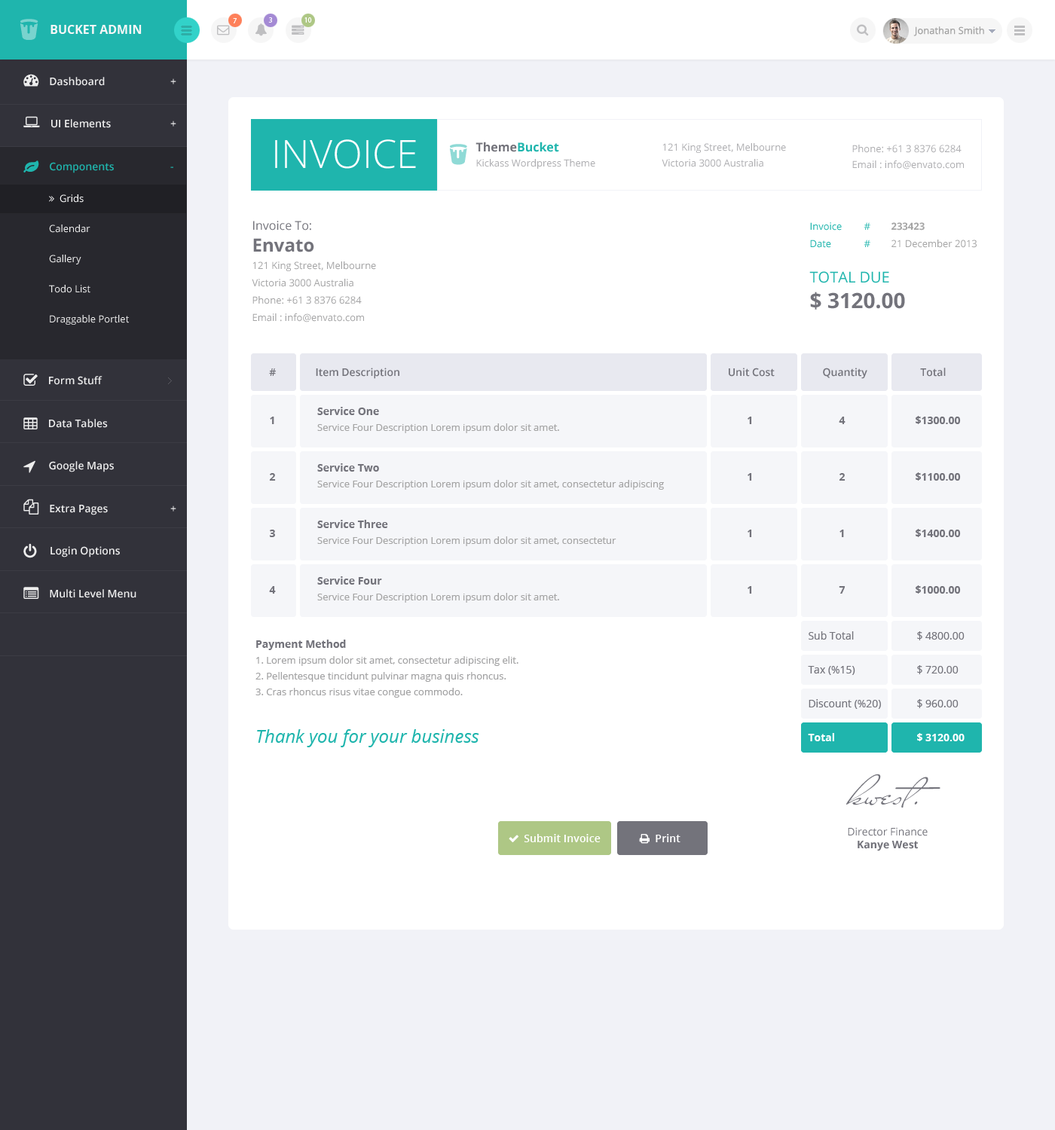
<style>
.page{position:relative;width:1055px;height:1130px;background:#ffffff}
.page>*{position:absolute;margin:0}
.t1{font:7.5px "MyriadPro-Regular";color:#ffffff}
.t2{font:12.1px "OpenSans-Bold";color:#f6f6f6}
.t3{font:9.8px "OpenSans";color:#a4a4a4}
.t4{font:39.2px "OpenSans-Light";color:#ffffff;text-transform:uppercase}
.t5{font:9.8px/15.1px "OpenSans";color:#aeaeb1}
.t6{font:12.1px/15.1px "OpenSans-Bold";color:#73737b}
.t7{font:12.1px/15.1px "OpenSans-Bold";color:#1fb5ad}
.t8{font:9.8px/15.8px "OpenSans";color:#aeaeb1}
.t9{font:9.8px/17.3px "OpenSans";color:#a4a4a5}
.t10{font:12.1px "OpenSans";color:#73737b}
.t11{font:18.1px "OpenSans-Bold";color:#73737b}
.t12{font:9.8px/17.3px "OpenSans";color:#a5a5a5}
.t13{font:9.8px/17.3px "OpenSans";color:#1fb5ad}
.t14{font:9.8px/17.3px "OpenSans-Bold";color:#a5a5a5}
.t15{font:15.1px "OpenSans";color:#1fb5ad;text-transform:uppercase}
.t16{font:21.1px "OpenSans-Bold";color:#73737b}
.t17{font:10.5px "OpenSans-Semibold";color:#73737b}
.t18{font:9.8px/15.8px "OpenSans";color:#a5a5a5}
.t19{font:10.5px/15.8px "OpenSans-Bold";color:#73737b}
.t20{font:10.5px "OpenSans-Bold";color:#73737b}
.t21{font:9.8px/15.8px "OpenSans";color:#a3a3a4}
.t22{font:18.1px/15.8px "OpenSans-Italic";color:#1fb5ad}
.t23{font:10.5px/33.9px "OpenSans";color:#73737b}
.t24{font:10.5px/33.9px "OpenSans-Bold";color:#ffffff}
.t25{font:44.1px "MissStanfort";color:#73737b}
.t26{font:10.5px "OpenSans";color:#73737b}
</style>
<div class="page">
<p class="t1" style="left:268px;top:17px;width:4px;height:6px">3</p>
<p class="t1" style="left:304px;top:17px;width:8px;height:6px">10</p>
<p class="t2" style="left:50px;top:25px;width:92px;height:9px">BUCKET ADMIN</p>
<p class="t1" style="left:233px;top:18px;width:4px;height:5px">7</p>
<p class="t3" style="left:913px;top:26px;width:71px;height:10px">Jonathan Smith</p>
<p class="t4" style="left:275px;top:139px;width:141px;height:30px">INVOICE</p>
<p class="t5" style="left:475px;top:142px;width:120px;height:27px"><span class="t6">Theme</span><span class="t7">Bucket<br></span>Kickass Wordpress Theme</p>
<p class="t8" style="left:662px;top:143px;width:124px;height:24px">121 King Street, Melbourne <br>Victoria 3000 Australia</p>
<p class="t8" style="left:852px;top:145px;width:112px;height:25px">Phone: +61 3 8376 6284<br>Email : info@envato.com</p>
<p class="t9" style="left:252px;top:221px;width:124px;height:102px"><span class="t10">Invoice To:<br></span><span class="t11">Envato<br></span>121 King Street, Melbourne <br>Victoria 3000 Australia<br>Phone: +61 3 8376 6284<br>Email : info@envato.com</p>
<p class="t12" style="left:809px;top:222px;width:168px;height:88px"><span class="t13">Invoice  # </span><span class="t14">233423<br></span><span class="t13">Date  # </span>21 December 2013<br><br><span class="t15">Total Due<br></span><span class="t16">$ 3120.00</span></p>
<p class="t17" style="left:269px;top:368px;width:677px;height:11px">#     Item Description                 Unit Cost  Quantity        Total</p>
<p class="t18" style="left:317px;top:407px;width:242px;height:26px"><span class="t19">Service One <br></span>Service Four Description Lorem ipsum dolor sit amet.</p>
<p class="t20" style="left:270px;top:416px;width:691px;height:8px">1                       1    4          $1300.00</p>
<p class="t20" style="left:269px;top:472px;width:692px;height:9px">2                       1    2          $1100.00</p>
<p class="t18" style="left:317px;top:463px;width:347px;height:27px"><span class="t19">Service Two<br></span>Service Four Description Lorem ipsum dolor sit amet, consectetur adipiscing</p>
<p class="t18" style="left:317px;top:520px;width:299px;height:26px"><span class="t19">Service Three<br></span>Service Four Description Lorem ipsum dolor sit amet, consectetur</p>
<p class="t20" style="left:269px;top:529px;width:692px;height:8px">3                       1    1          $1400.00</p>
<p class="t18" style="left:317px;top:576px;width:242px;height:27px"><span class="t19">Service Four<br></span>Service Four Description Lorem ipsum dolor sit amet.</p>
<p class="t20" style="left:269px;top:586px;width:692px;height:8px">4                       1    7          $1000.00</p>
<p class="t21" style="left:255px;top:640px;width:263px;height:108px"><span class="t19">Payment Method<br></span>1. Lorem ipsum dolor sit amet, consectetur adipiscing elit. <br>2. Pellentesque tincidunt pulvinar magna quis rhoncus. <br>3. Cras rhoncus risus vitae congue commodo.<br><br><br><span class="t22">Thank you for your business</span></p>
<p class="t23" style="left:808px;top:631px;width:157px;height:110px">Sub Total   $ 4800.00<br>Tax (%15)   $ 720.00      <br>Discount (%20)  $ 960.00<br><span class="t24">Total    $ 3120.00</span></p>
<p class="t25" style="left:846px;top:774px;width:94px;height:34px">kwest.</p>
<p class="t26" style="left:848px;top:827px;width:80px;height:25px;text-align:center">Director Finance<br><span class="t20">Kanye West</span></p>
</div>
